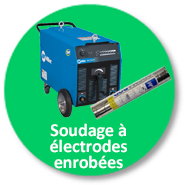
<style>
.page{position:relative;width:185px;height:185px;background:#00cc66}
.page>*{position:absolute;margin:0}
.t1{font:18px/16px "Calibri-Bold";color:#ffffff}
</style>
<div class="page">
<p class="t1" style="left:50px;top:123px;width:77px;height:46px;text-align:center">Soudage à <br>électrodes <br>enrobées <br>serrage</p>
</div>
